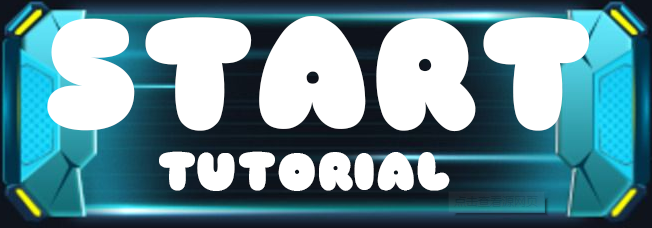
<style>
.page{position:relative;width:652px;height:228px;background:#ffffff}
.page>*{position:absolute;margin:0}
.t1{font:155.9px "Sniglet";color:#ffffff;font-variant:small-caps}
.t2{font:53.4px "Sniglet";color:#ffffff;font-variant:small-caps}
</style>
<div class="page">
<p class="t1" style="left:47px;top:16px;width:543px;height:116px">START</p>
<p class="t2" style="left:159px;top:151px;width:291px;height:40px">TUTORIAL</p>
</div>
